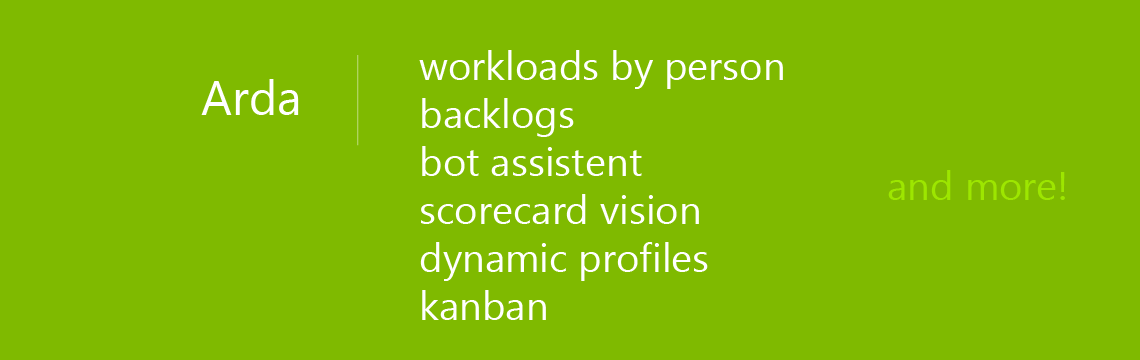
<style>
.page{position:relative;width:1140px;height:360px;background:#7fba00}
.page>*{position:absolute;margin:0}
.t1{font:40px "SegoeUI";color:#ffffff}
.t2{font:48px "SegoeUI";color:#ffffff}
.t3{font:40px "SegoeUI";color:#9de600}
</style>
<div class="page">
<p class="t1" style="left:419px;top:50px;width:364px;height:270px">workloads by person<br>backlogs<br>bot assistent<br>scorecard vision<br>dynamic profiles<br>kanban</p>
<p class="t2" style="left:201px;top:79px;width:98px;height:36px">Arda</p>
<p class="t3" style="left:888px;top:170px;width:177px;height:30px">and more!</p>
</div>
